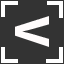
<style>
.page{position:relative;width:64px;height:64px;background:#333333}
.page>*{position:absolute;margin:0}
.t1{font:50px "MyriadPro-Bold";color:#fffcfc}
</style>
<div class="page">
<p class="t1" style="left:15px;top:16px;width:34px;height:31px;rotate:90deg">V</p>
</div>
